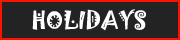
<style>
.page{position:relative;width:180px;height:40px;background:#232323}
.page>*{position:absolute;margin:0}
.t1{font:22px "Jokerman-Regular";color:#ffffff}
</style>
<div class="page">
<p class="t1" style="left:32px;top:9px;width:114px;height:22px">HOLIDAYS</p>
</div>
